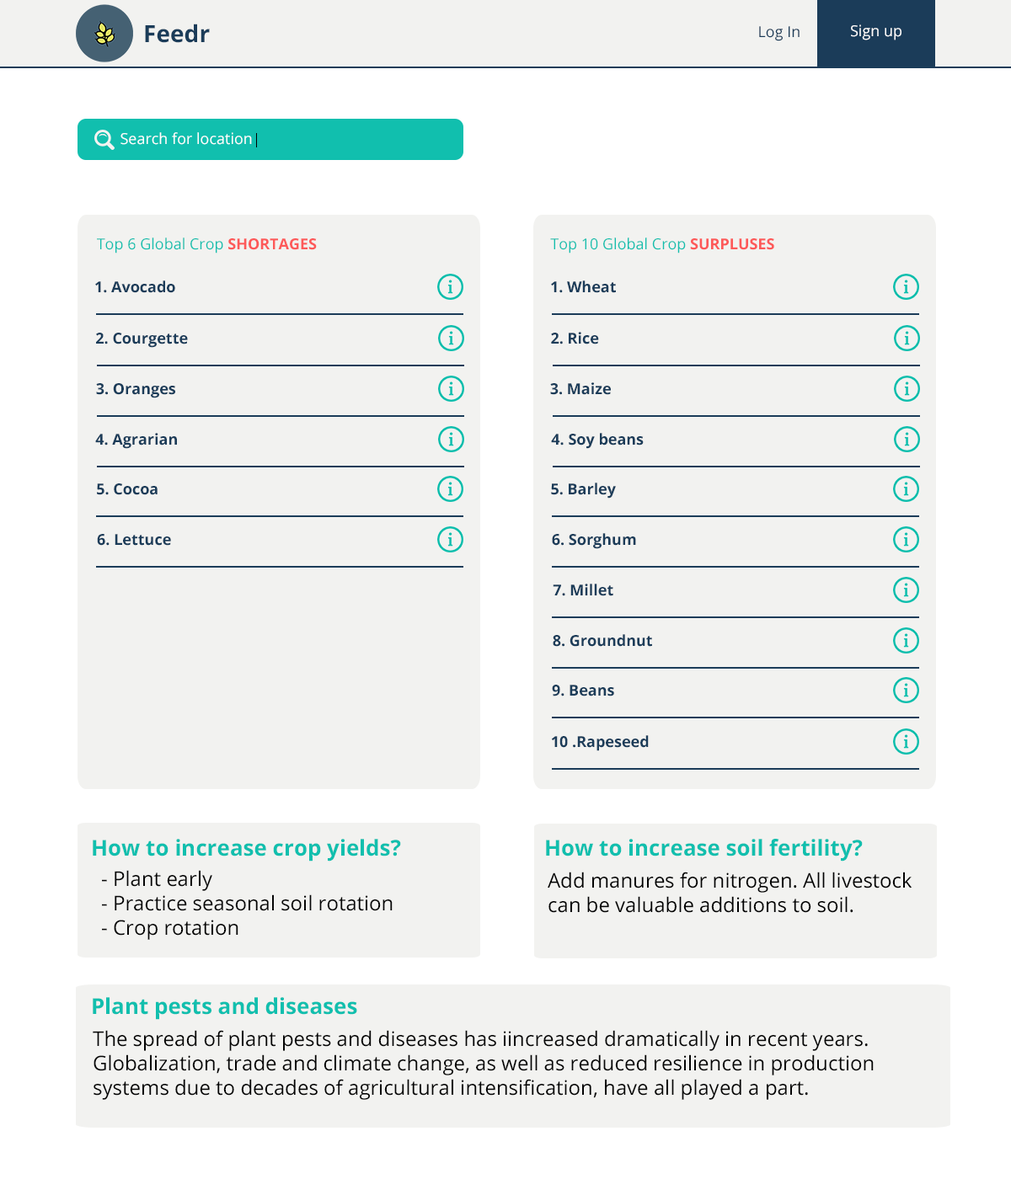
<style>
.page{position:relative;width:1011px;height:1179px;background:#f2f2f0}
.page>*{position:absolute;margin:0}
.t1{font:23.6px "OpenSans-Bold";color:#1b3c59}
.t2{font:15.2px "OpenSans";color:#1b3c59}
.t3{font:15.2px "OpenSans";color:#ffffff}
.t4{font:15.2px "OpenSans";color:#11bfae}
.t5{font:15.2px "OpenSans-Bold";color:#fd5959}
.t6{font:15.2px "OpenSans-Bold";color:#1b3c59}
.t7{font:21.9px "OpenSans-Bold";color:#11bfae}
.t8{font:20.2px "OpenSans";color:#060606}
.t9{font:20.2px "OpenSans";color:#010101}
.t10{font:20.2px "OpenSans";color:#040404}
</style>
<div class="page">
<p class="t1" style="left:145px;top:24px;width:65px;height:19px">Feedr</p>
<p class="t2" style="left:759px;top:26px;width:41px;height:15px">Log In</p>
<p class="t3" style="left:851px;top:24px;width:50px;height:16px">Sign up</p>
<p class="t3" style="left:120px;top:132px;width:132px;height:13px">Search for location</p>
<p class="t4" style="left:97px;top:238px;width:220px;height:16px">Top 6 Global Crop <span class="t5">SHORTAGES</span></p>
<p class="t4" style="left:550px;top:238px;width:224px;height:16px">Top 10 Global Crop <span class="t5">SURPLUSES</span></p>
<p class="t6" style="left:95px;top:281px;width:80px;height:12px">1. Avocado</p>
<p class="t6" style="left:551px;top:281px;width:65px;height:12px">1. Wheat</p>
<p class="t6" style="left:96px;top:333px;width:92px;height:15px">2. Courgette</p>
<p class="t6" style="left:551px;top:332px;width:48px;height:13px">2. Rice</p>
<p class="t6" style="left:96px;top:383px;width:79px;height:15px">3. Oranges</p>
<p class="t6" style="left:550px;top:382px;width:61px;height:13px">3. Maize</p>
<p class="t6" style="left:95px;top:433px;width:82px;height:16px">4. Agrarian</p>
<p class="t6" style="left:551px;top:433px;width:93px;height:16px">4. Soy beans</p>
<p class="t6" style="left:97px;top:484px;width:61px;height:11px">5. Cocoa</p>
<p class="t6" style="left:551px;top:483px;width:65px;height:16px">5. Barley</p>
<p class="t6" style="left:552px;top:533px;width:84px;height:16px">6. Sorghum</p>
<p class="t6" style="left:97px;top:534px;width:74px;height:12px">6. Lettuce</p>
<p class="t6" style="left:553px;top:584px;width:60px;height:12px">7. Millet</p>
<p class="t6" style="left:553px;top:634px;width:99px;height:13px">8. Groundnut</p>
<p class="t6" style="left:552px;top:685px;width:62px;height:12px">9. Beans</p>
<p class="t6" style="left:552px;top:735px;width:97px;height:16px">10 .Rapeseed</p>
<p class="t7" style="left:93px;top:839px;width:308px;height:23px">How to increase crop yields?</p>
<p class="t7" style="left:546px;top:839px;width:317px;height:23px">How to increase soil fertility?</p>
<p class="t8" style="left:102px;top:870px;width:291px;height:70px">- Plant early<br>- Practice seasonal soil rotation<br>- Crop rotation</p>
<p class="t9" style="left:548px;top:872px;width:364px;height:41px">Add manures for nitrogen. All livestock<br>can be valuable additions to soil.</p>
<p class="t7" style="left:93px;top:998px;width:264px;height:22px">Plant pests and diseases</p>
<p class="t10" style="left:93px;top:1030px;width:781px;height:70px">The spread of plant pests and diseases has iincreased dramatically in recent years. <br>Globalization, trade and climate change, as well as reduced resilience in production <br>systems due to decades of agricultural intensification, have all played a part.</p>
</div>
